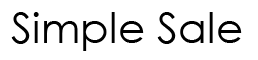
<style>
.page{position:relative;width:258px;height:60px;background:#ffffff}
.page>*{position:absolute;margin:0}
.t1{font:41.7px "CenturyGothic";letter-spacing:0.01em;color:#000000}
</style>
<div class="page">
<p class="t1" style="left:11px;top:12px;width:231px;height:39px">Simple Sale</p>
</div>
